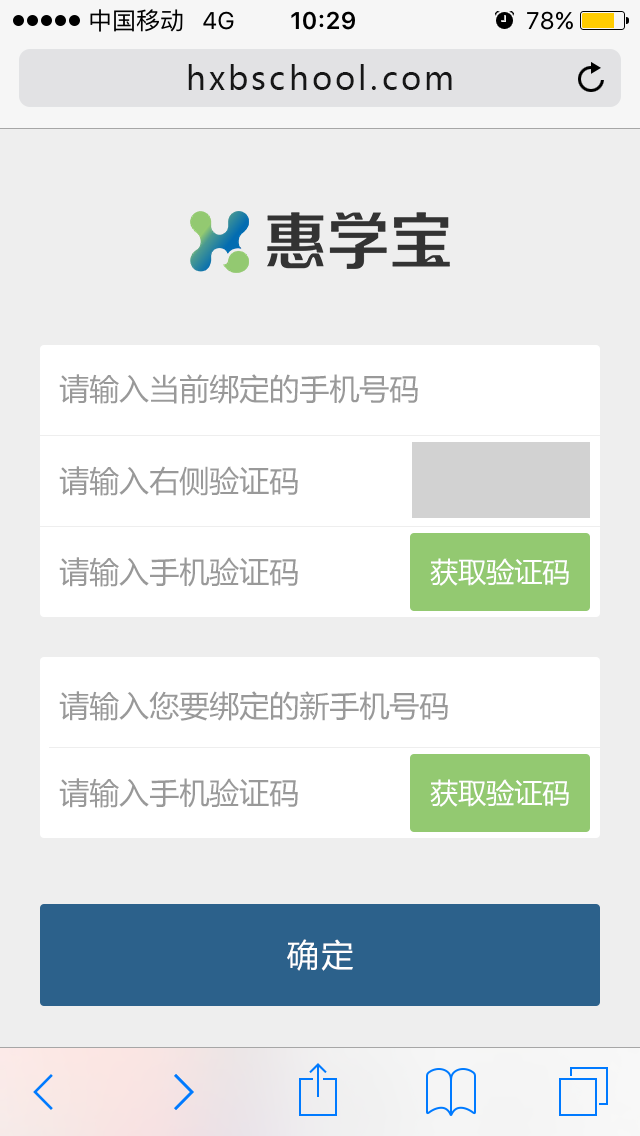
<style>
.page{position:relative;width:640px;height:1136px;background:#eeeeee}
.page>*{position:absolute;margin:0}
.t1{font:32px "MicrosoftYaHei";letter-spacing:0.1em;color:#171717}
.t2{font:30px "MicrosoftYaHei";color:#999999}
.t3{font:28px "MicrosoftYaHei";color:#ffffff}
.t4{font:32px "MicrosoftYaHei";letter-spacing:0.075em;color:#ffffff}
</style>
<div class="page">
<p class="t1" style="left:188px;top:64px;width:264px;height:26px">hxbschool.com</p>
<p class="t2" style="left:59px;top:374px;width:359px;height:30px">请输入当前绑定的手机号码</p>
<p class="t2" style="left:59px;top:466px;width:239px;height:30px">请输入右侧验证码</p>
<p class="t2" style="left:59px;top:557px;width:239px;height:30px">请输入手机验证码</p>
<p class="t3" style="left:430px;top:558px;width:139px;height:28px">获取验证码</p>
<p class="t2" style="left:59px;top:691px;width:389px;height:30px">请输入您要绑定的新手机号码</p>
<p class="t2" style="left:59px;top:778px;width:239px;height:30px">请输入手机验证码</p>
<p class="t3" style="left:430px;top:779px;width:139px;height:28px">获取验证码</p>
<p class="t4" style="left:287px;top:939px;width:66px;height:32px">确定</p>
</div>
